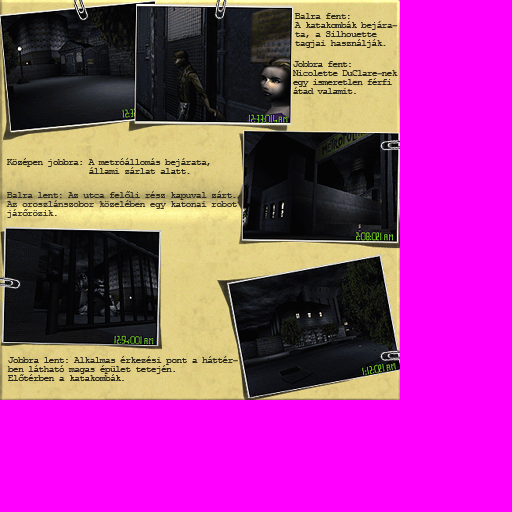
<style>
.page{position:relative;width:512px;height:512px;background:#ff00ff}
.page>*{position:absolute;margin:0}
.t1{font:10.4px/9px "CourierNewPSMT";letter-spacing:-0.111em;color:#2a271c}
.t2{font:8.4px/9px "CourierNewPSMT";letter-spacing:-0.111em;color:#2a271c;scale:1.25 1}
.t3{font:10.1px/9px "CourierNewPSMT";letter-spacing:-0.111em;color:#2a271c}
.t4{font:8.1px/9px "CourierNewPSMT";letter-spacing:-0.111em;color:#2a271c;scale:1.25 1}
.t5{font:10.4px/9px "CourierNewPSMT";letter-spacing:-0.111em;color:#302e25}
.t6{font:8.4px/72px "CourierNewPSMT";letter-spacing:-0.111em;color:#2a271c;scale:1.25 1}
</style>
<div class="page">
<p class="t1" style="left:294px;top:13px;width:104px;height:35px">Balra fent:<br>A katakombák bejára<span class="t2">-<br></span>ta, a Silhouette<br>tagjai használják.</p>
<p class="t3" style="left:293px;top:61px;width:105px;height:33px">Jobbra fent:<br>Nicolette DuClare<span class="t4">-</span>nek<br>egy ismeretlen férfi<br>átad valamit.</p>
<p class="t1" style="left:7px;top:158px;width:203px;height:16px">Középen jobbra: A metróállomás bejárata,<br>                állami zárlat alatt.</p>
<p class="t5" style="left:6px;top:191px;width:231px;height:27px">Balra lent: Az utca felőli rész kapuval zárt.<br>Az oroszlánszobor közelében egy katonai robot<br>járőrözik.</p>
<p class="t1" style="left:7px;top:356px;width:231px;height:25px">Jobbra lent: Alkalmas érkezési pont a háttér<span class="t6">-<br></span>ben látható magas épület tetején.<br>Előtérben a katakombák.</p>
</div>
